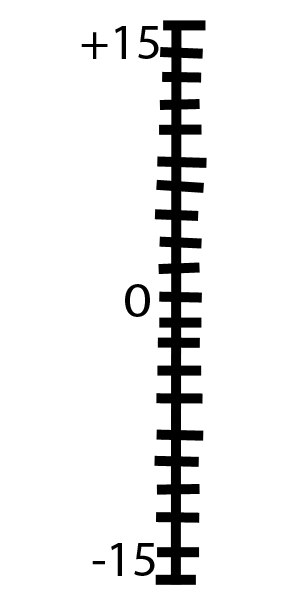
<style>
.page{position:relative;width:299px;height:600px;background:#ffffff}
.page>*{position:absolute;margin:0}
.t1{font:50px "MyriadPro-Regular";color:#000000}
.t2{font:50px "MyriadPro-Regular";color:#000000;scale:1.15 1}
</style>
<div class="page">
<p class="t1" style="left:81px;top:26px;width:78px;height:33px">+15</p>
<p class="t2" style="left:125px;top:284px;width:25px;height:33px">0</p>
<p class="t1" style="left:92px;top:543px;width:63px;height:33px">-15</p>
</div>
